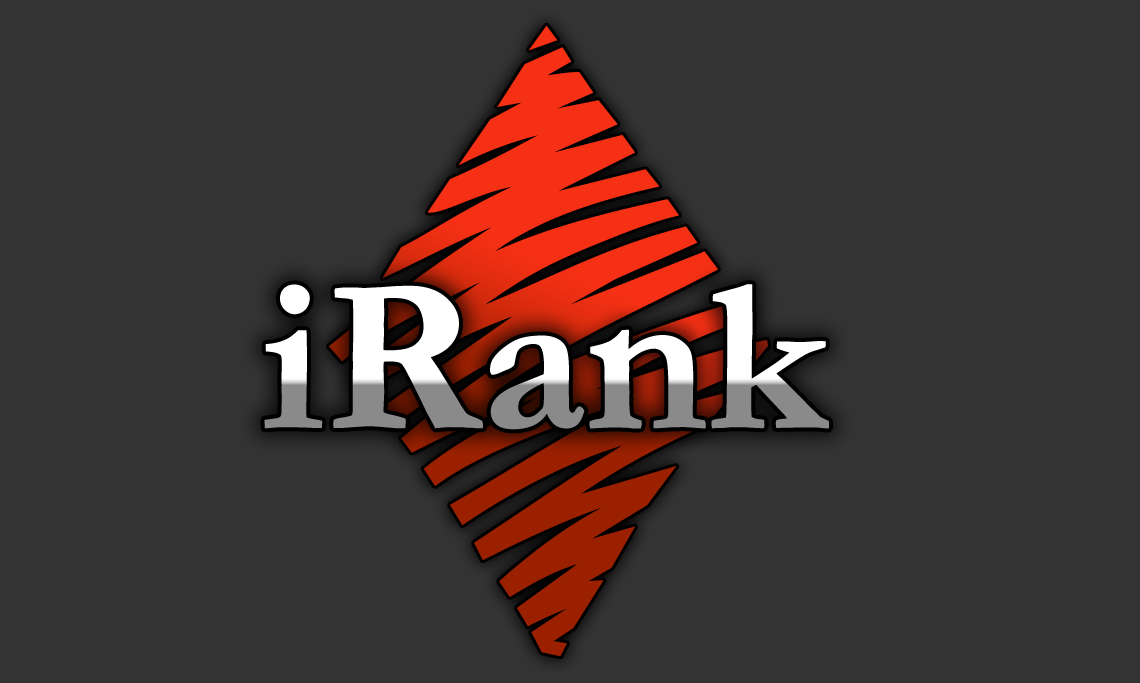
<style>
.page{position:relative;width:1140px;height:683px;background:#333333}
.page>*{position:absolute;margin:0}
.t1{font:221px "Garamond-Bold";letter-spacing:-0.025em;font-weight:bold}
</style>
<div class="page">
<p class="t1" style="left:264px;top:284px;width:565px;height:146px">iRank</p>
</div>
